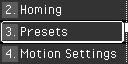
<style>
.page{position:relative;width:128px;height:64px;background:#333333}
.page>*{position:absolute;margin:0}
.t1{font:16px "PixelOperator";color:#ffffff}
</style>
<div class="page">
<p class="t1" style="left:6px;top:5px;width:10px;height:9px">2.</p>
<p class="t1" style="left:20px;top:5px;width:41px;height:11px">Homing</p>
<p class="t1" style="left:6px;top:27px;width:10px;height:9px">3.</p>
<p class="t1" style="left:20px;top:27px;width:47px;height:9px">Presets</p>
<p class="t1" style="left:6px;top:49px;width:10px;height:9px">4.</p>
<p class="t1" style="left:20px;top:49px;width:96px;height:11px">Motion Settings</p>
</div>
